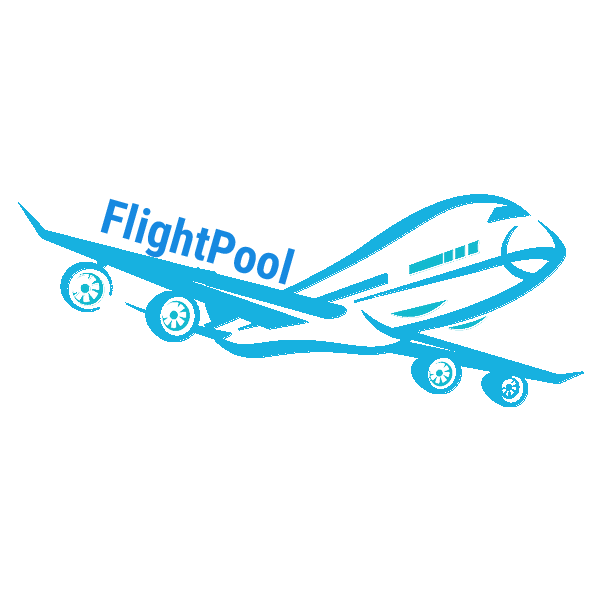
<style>
.page{position:relative;width:600px;height:600px;background:#ffffff}
.page>*{position:absolute;margin:0}
.t1{font:48px "RobotoCondensed-Bold";color:#1789e0}
</style>
<div class="page">
<p class="t1" style="left:100px;top:198px;width:195px;height:87px;rotate:16deg">FlightPool</p>
</div>
